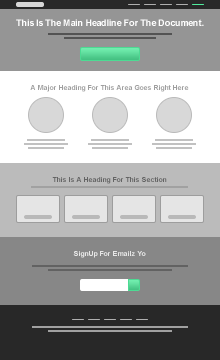
<style>
.page{position:relative;width:220px;height:360px}
.page>*{position:absolute;margin:0}
.t1{font:8.9px "Arial-BoldMT";color:#ffffff}
.t2{font:7px "Arial-BoldMT";color:#9f9f9f}
.t3{font:7px "Arial-BoldMT";color:#656565}
.t4{font:7px "Arial-BoldMT";color:#e7e7e7}
</style>
<div class="page">
<p class="t1" style="left:16px;top:19px;width:188px;height:7px">This Is The Main Headline For The Document.</p>
<p class="t2" style="left:30px;top:85px;width:159px;height:7px">A Major Heading For This Area Goes Right Here</p>
<p class="t3" style="left:52px;top:177px;width:115px;height:7px">This Is A Heading For This Section</p>
<p class="t4" style="left:73px;top:251px;width:73px;height:7px">SignUp For Emailz Yo</p>
</div>
